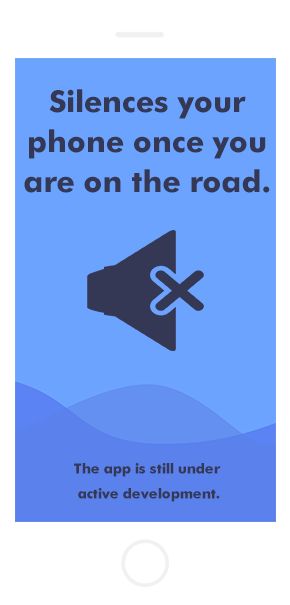
<style>
.page{position:relative;width:290px;height:605px;background:#6ca3ff}
.page>*{position:absolute;margin:0}
.t1{font:30px/40px "FuturaBT-Bold";color:#353854}
.t2{font:14px/25px "FuturaBT-Bold";color:#353854}
</style>
<div class="page">
<p class="t1" style="left:24px;top:89px;width:246px;height:104px;text-align:center">Silences your<br>phone once you<br>are on the road.</p>
<p class="t2" style="left:74px;top:463px;width:147px;height:39px;text-align:center">The app is still under <br>active development.</p>
</div>
